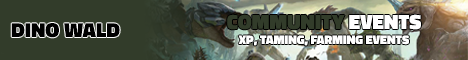
<style>
.page{position:relative;width:468px;height:60px;background:#323c2a}
.page>*{position:absolute;margin:0}
.t1{font:12.5px "TitilliumWeb-Black";color:#ffffff;text-transform:uppercase}
.t2{font:20.8px "TitilliumWeb-Black";color:#323c2a;font-variant:small-caps}
.t3{font:20.8px "TitilliumWeb-Black";color:#323c2a;text-transform:uppercase}
.t4{font:20.8px "TitilliumWeb-Black";color:#ffffff;text-transform:uppercase}
.t5{font:20.4px "TitilliumWeb-Black";color:#000000;text-transform:uppercase}
</style>
<div class="page">
<p class="t1" style="left:227px;top:14px;width:194px;height:32px;text-align:center"><span class="t2">C</span><span class="t3">ommunity</span><span class="t4"> EvenTs<br></span>XP, Taming, Farming events</p>
<p class="t5" style="left:11px;top:23px;width:109px;height:15px">dino wald</p>
</div>
